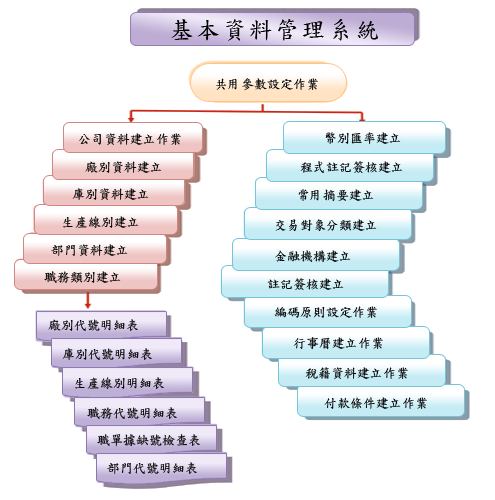
<style>
.page{position:relative;width:495px;height:500px;background:#ffffff}
.page>*{position:absolute;margin:0}
.t1{font:24px "DFKaiShu-SB-Estd-BF";letter-spacing:0.1em;color:#000000}
.t2{font:13px "DFKaiShu-SB-Estd-BF";color:#000000}
</style>
<div class="page">
<p class="t1" style="left:171px;top:19px;width:207px;height:22px">基本資料管理系統</p>
<p class="t2" style="left:216px;top:78px;width:102px;height:13px">共用參數設定作業</p>
<p class="t2" style="left:79px;top:133px;width:102px;height:13px">公司資料建立作業</p>
<p class="t2" style="left:325px;top:132px;width:76px;height:13px">幣別匯率建立</p>
<p class="t2" style="left:85px;top:161px;width:77px;height:13px">廠別資料建立</p>
<p class="t2" style="left:300px;top:161px;width:103px;height:12px">程式註記簽核建立</p>
<p class="t2" style="left:72px;top:188px;width:77px;height:13px">庫別資料建立</p>
<p class="t2" style="left:298px;top:189px;width:76px;height:13px">常用摘要建立</p>
<p class="t2" style="left:63px;top:216px;width:76px;height:12px">生產線別建立</p>
<p class="t2" style="left:275px;top:219px;width:102px;height:13px">交易對象分類建立</p>
<p class="t2" style="left:51px;top:244px;width:77px;height:13px">部門資料建立</p>
<p class="t2" style="left:275px;top:250px;width:76px;height:12px">金融機構建立</p>
<p class="t2" style="left:44px;top:271px;width:77px;height:12px">職務類別建立</p>
<p class="t2" style="left:267px;top:278px;width:77px;height:12px">註記簽核建立</p>
<p class="t2" style="left:274px;top:306px;width:103px;height:12px">編碼原則設定作業</p>
<p class="t2" style="left:48px;top:319px;width:90px;height:12px">廠別代號明細表</p>
<p class="t2" style="left:293px;top:337px;width:90px;height:13px">行事曆建立作業</p>
<p class="t2" style="left:62px;top:348px;width:90px;height:12px">庫別代號明細表</p>
<p class="t2" style="left:75px;top:377px;width:89px;height:12px">生產線別明細表</p>
<p class="t2" style="left:305px;top:367px;width:103px;height:13px">稅籍資料建立作業</p>
<p class="t2" style="left:324px;top:397px;width:103px;height:12px">付款條件建立作業</p>
<p class="t2" style="left:87px;top:407px;width:90px;height:12px">職務代號明細表</p>
<p class="t2" style="left:97px;top:434px;width:103px;height:13px">職單據缺號檢查表</p>
<p class="t2" style="left:107px;top:462px;width:90px;height:12px">部門代號明細表</p>
</div>
